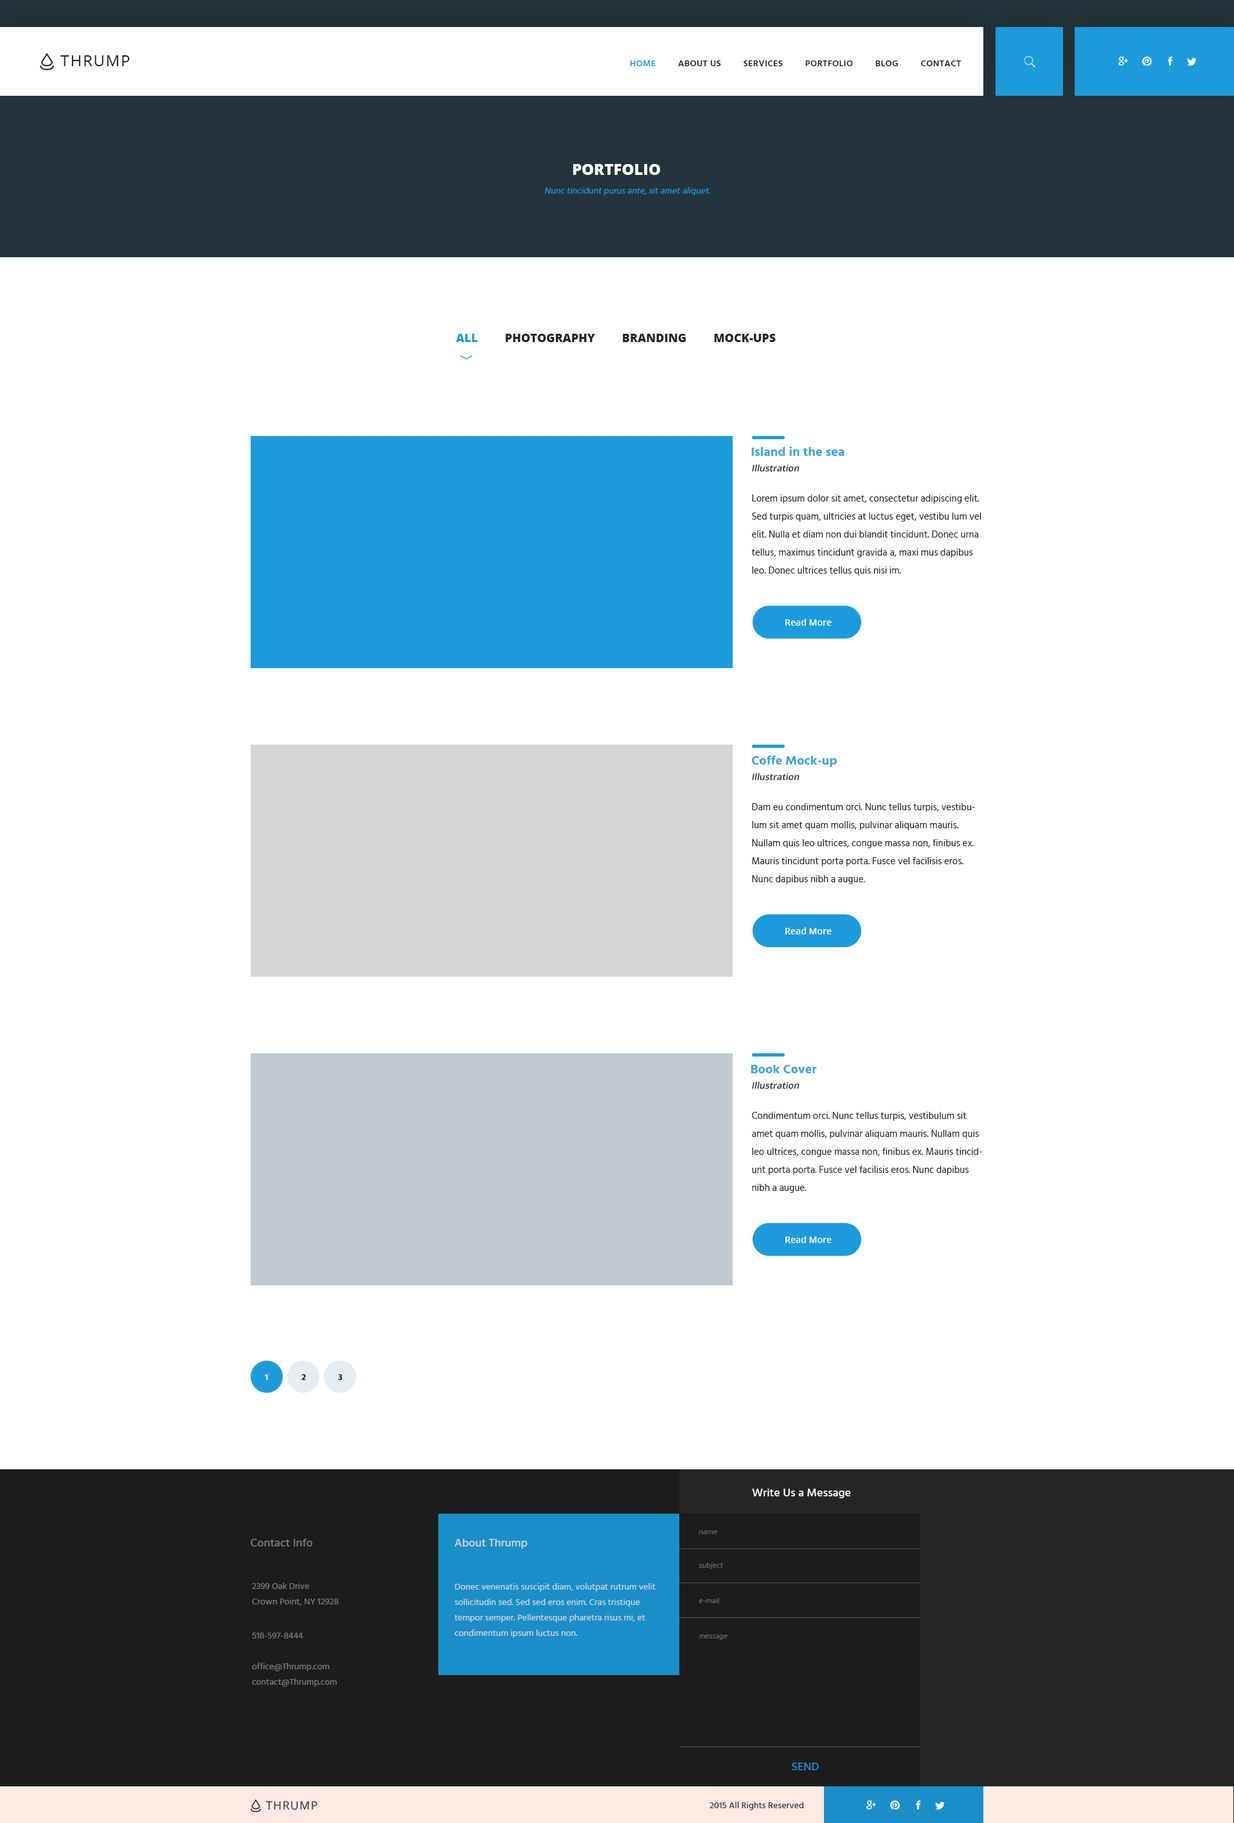
<style>
.page{position:relative;width:1234px;height:1823px;background:#ffffff}
.page>*{position:absolute;margin:0}
.t1{font:15.4px "OpenSans";letter-spacing:0.075em;color:#252525;text-transform:uppercase}
.t2{font:9px "Hind-Semibold";letter-spacing:0.025em;color:#252525;text-transform:uppercase}
.t3{font:9px "Hind-Semibold";letter-spacing:0.025em;color:#1c9bdc;text-transform:uppercase}
.t4{font:15.4px "OpenSans-Extrabold";color:#ffffff;text-transform:uppercase}
.t5{font:9px "Hind-Regular";color:#1c9bdc;font-style:italic}
.t6{font:11.6px "OpenSans-Extrabold";color:#252525;text-transform:uppercase}
.t7{font:11.6px "OpenSans-Extrabold";color:#1c9bdc;text-transform:uppercase}
.t8{font:12.9px "Hind-Bold";color:#38a2de}
.t9{font:9px "OpenSans-Semibold";color:#252525;font-style:italic}
.t10{font:9.6px/18px "Hind-Regular";color:#252525}
.t11{font:9.6px/17.4px "Hind-Regular";color:#252525}
.t12{font:9px "OpenSans-Semibold";color:#ffffff}
.t13{font:9px "Hind-Bold";color:#ffffff}
.t14{font:9px "Hind-Bold";color:#1c1c1c}
.t15{font:11.6px "Hind-Medium";color:#ffffff}
.t16{font:11.6px "Hind-Medium";color:#7b7b7b}
.t17{font:11.6px "Hind-Medium";color:#d6d6d6}
.t18{font:7.7px "Hind-Regular";color:#686868;font-style:italic}
.t19{font:9px/15.4px "Hind-Regular";color:#7b7b7b}
.t20{font:9px/15.4px "Hind-Regular";color:#d6d6d6}
.t21{font:9px "Hind-Regular";color:#7b7b7b}
.t22{font:11.6px "Hind-Medium";color:#1a8ec9}
.t23{font:11.4px "OpenSans";letter-spacing:0.075em;color:#252525;text-transform:uppercase}
.t24{font:9px "Hind-Medium";color:#273941}
</style>
<div class="page">
<p class="t1" style="left:60px;top:55px;width:70px;height:11px">Thrump</p>
<p class="t2" style="left:630px;top:60px;width:332px;height:6px"><span class="t3">Home</span>         About Us         Services         Portfolio         Blog         Contact</p>
<p class="t4" style="left:573px;top:164px;width:87px;height:11px">Portfolio</p>
<p class="t5" style="left:545px;top:187px;width:165px;height:8px">Nunc tincidunt purus ante, sit amet aliquet.</p>
<p class="t6" style="left:456px;top:334px;width:320px;height:8px"><span class="t7">All         </span>Photography         Branding         Mock-ups</p>
<p class="t8" style="left:752px;top:446px;width:93px;height:10px">Island in the sea</p>
<p class="t9" style="left:752px;top:464px;width:48px;height:8px">Illustration</p>
<p class="t10" style="left:752px;top:494px;width:230px;height:81px"><span class="t11">L</span>orem ipsum dolor sit amet, consectetur adipiscing elit. Sed turpis quam, ultricies at luctus eget, vestibu lum vel elit. Nulla et diam non dui blandit tincidunt. Donec urna tellus, maximus tincidunt gravida a, maxi mus dapibus leo. Donec ultrices tellus quis nisi im.</p>
<p class="t12" style="left:786px;top:618px;width:46px;height:8px">Read More</p>
<p class="t8" style="left:752px;top:755px;width:85px;height:12px">Coffe Mock-up</p>
<p class="t9" style="left:752px;top:773px;width:48px;height:7px">Illustration</p>
<p class="t10" style="left:752px;top:803px;width:223px;height:81px">Dam eu condimentum orci. Nunc tellus turpis, vestibulum sit amet quam mollis, pulvinar aliquam mauris. Nullam quis leo ultrices, congue massa non, finibus ex. Mauris tincidunt porta porta. Fusce vel facilisis eros. Nunc dapibus nibh a augue.</p>
<p class="t12" style="left:786px;top:927px;width:46px;height:7px">Read More</p>
<p class="t8" style="left:751px;top:1065px;width:66px;height:8px">Book Cover</p>
<p class="t9" style="left:752px;top:1081px;width:48px;height:8px">Illustration</p>
<p class="t10" style="left:752px;top:1112px;width:230px;height:80px">Condimentum orci. Nunc tellus turpis, vestibulum sit amet quam mollis, pulvinar aliquam mauris. Nullam quis leo ultrices, congue massa non, finibus ex. Mauris tincidunt porta porta. Fusce vel facilisis eros. Nunc dapibus nibh a augue.</p>
<p class="t12" style="left:786px;top:1236px;width:46px;height:7px">Read More</p>
<p class="t13" style="left:265px;top:1374px;width:3px;height:6px">1</p>
<p class="t14" style="left:302px;top:1374px;width:4px;height:6px">2</p>
<p class="t14" style="left:338px;top:1374px;width:5px;height:6px">3</p>
<p class="t15" style="left:752px;top:1488px;width:99px;height:10px">Write Us a Message</p>
<p class="t16" style="left:251px;top:1538px;width:61px;height:8px">Contact Info</p>
<p class="t17" style="left:455px;top:1538px;width:73px;height:10px">About Thrump</p>
<p class="t18" style="left:699px;top:1530px;width:18px;height:4px">name</p>
<p class="t18" style="left:699px;top:1562px;width:24px;height:7px">subject</p>
<p class="t19" style="left:252px;top:1582px;width:87px;height:23px">2399 Oak Drive<br>Crown Point, NY 12928</p>
<p class="t20" style="left:455px;top:1583px;width:201px;height:54px">Donec venenatis suscipit diam, volutpat rutrum velit sollicitudin sed. Sed sed eros enim. Cras tristique tempor semper. Pellentesque pharetra risus mi, et condimentum ipsum luctus non.</p>
<p class="t18" style="left:699px;top:1598px;width:21px;height:5px">e-mail</p>
<p class="t21" style="left:252px;top:1632px;width:51px;height:6px">518-597-8444</p>
<p class="t18" style="left:699px;top:1634px;width:29px;height:5px">message</p>
<p class="t19" style="left:252px;top:1662px;width:85px;height:24px">office@Thrump.com<br>contact@Thrump.com</p>
<p class="t22" style="left:792px;top:1762px;width:27px;height:8px">SEND</p>
<p class="t23" style="left:266px;top:1801px;width:52px;height:9px">Thrump</p>
<p class="t24" style="left:710px;top:1801px;width:94px;height:9px">2015 All Rights Reserved</p>
</div>
